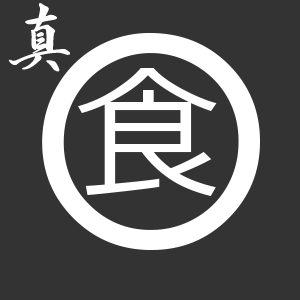
<style>
.page{position:relative;width:300px;height:300px;background:#333333}
.page>*{position:absolute;margin:0}
.t1{font:72px "CRPCandGRyuurei-B";color:#ffffff}
.t2{font:288px "CenturyGothic";color:#ffffff}
.t3{font:144px "Meiryo";color:#ffffff}
</style>
<div class="page">
<p class="t1" style="left:8px;top:3px;width:62px;height:69px">真</p>
<p class="t2" style="left:42px;top:33px;width:218px;height:217px">O</p>
<p class="t3" style="left:78px;top:68px;width:139px;height:128px">食</p>
</div>
